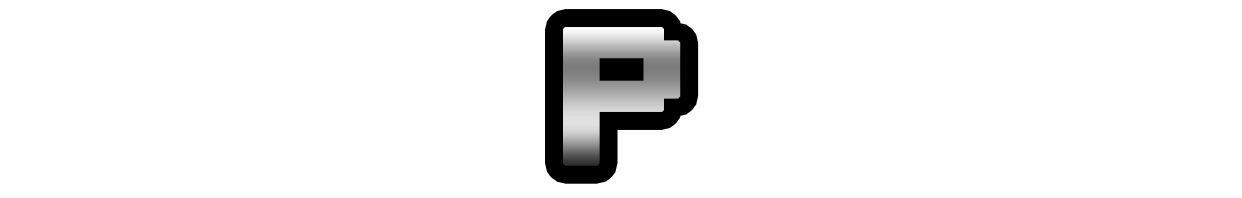
<style>
.page{position:relative;width:1242px;height:198px;background:#ffffff}
.page>*{position:absolute;margin:0}
.t1{font:215px "DOSIyagiMedium";letter-spacing:0.16em;font-weight:bold;scale:1.2 1}
</style>
<div class="page">
<p class="t1" style="left:563px;top:27px;width:118px;height:139px">P</p>
</div>
